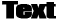
<style>
.page{position:relative;width:60px;height:19px;background:#000000}
.page>*{position:absolute;margin:0}
.t1{font:22px "Impact";letter-spacing:-0.06em;color:#000000;font-weight:bold;scale:1.52 1}
</style>
<div class="page">
<p class="t1" style="left:2px;top:1px;width:54px;height:18px">Text</p>
</div>
